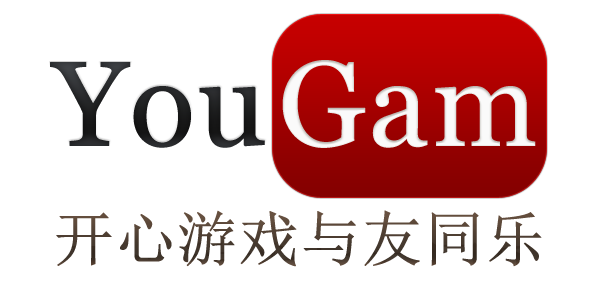
<style>
.page{position:relative;width:600px;height:286px;background:#ffffff}
.page>*{position:absolute;margin:0}
.t1{font:120px "Georgia";color:#222324;font-weight:bold}
.t2{font:120px "Georgia";color:#ffffff;font-weight:bold}
.t3{font:60px "SimSun";color:#4d3d31;font-weight:bold}
</style>
<div class="page">
<p class="t1" style="left:50px;top:62px;width:215px;height:86px">You</p>
<p class="t2" style="left:282px;top:60px;width:254px;height:88px">Gam</p>
<p class="t3" style="left:56px;top:210px;width:486px;height:57px">开心游戏与友同乐</p>
</div>
